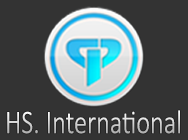
<style>
.page{position:relative;width:188px;height:140px;background:#333333}
.page>*{position:absolute;margin:0}
.t1{font:33.2px "Calibri-Light";scale:0.79 1}
</style>
<div class="page">
<p class="t1" style="left:7px;top:110px;width:173px;height:24px">HS. International</p>
</div>
